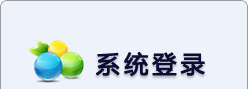
<style>
.page{position:relative;width:248px;height:89px;background:#eef2fb}
.page>*{position:absolute;margin:0}
.t1{font:24px "MicrosoftYaHei";letter-spacing:0.15em;color:#090f34;font-weight:bold}
</style>
<div class="page">
<p class="t1" style="left:96px;top:51px;width:109px;height:26px">系统登录</p>
</div>
